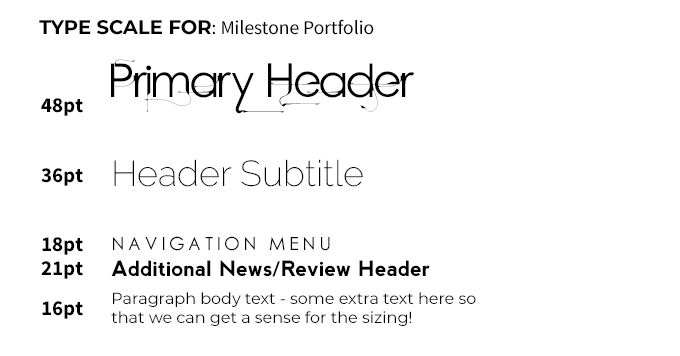
<style>
.page{position:relative;width:680px;height:356px;background:#ffffff}
.page>*{position:absolute;margin:0}
.t1{font:19.5px "SourceSansPro-Regular";color:#000000}
.t2{font:19.5px "Montserrat-Bold";color:#000000;text-transform:uppercase}
.t3{font:48px "BrightYoungThings";color:#000000}
.t4{font:21px "SourceSansPro-Bold";color:#000000}
.t5{font:36px "Raleway-ExtraLight";color:#000000}
.t6{font:18px "CenturyGothic";letter-spacing:0.2em;color:#000000}
.t7{font:21px "nevis-Bold";color:#000000}
.t8{font:16px/19.5px "Montserrat-Regular";color:#000000}
</style>
<div class="page">
<p class="t1" style="left:39px;top:19px;width:335px;height:16px"><span class="t2">TYPE SCALE for</span>: Milestone Portfolio</p>
<p class="t3" style="left:110px;top:59px;width:305px;height:55px">Primary Header</p>
<p class="t4" style="left:41px;top:98px;width:42px;height:18px">48pt</p>
<p class="t5" style="left:114px;top:159px;width:249px;height:28px">Header Subtitle</p>
<p class="t4" style="left:41px;top:168px;width:42px;height:18px">36pt</p>
<p class="t4" style="left:42px;top:237px;width:41px;height:18px">18pt</p>
<p class="t6" style="left:113px;top:236px;width:217px;height:15px">NAVIGATION MENU</p>
<p class="t4" style="left:41px;top:261px;width:42px;height:18px">21pt</p>
<p class="t7" style="left:111px;top:260px;width:319px;height:17px">Additional News/Review Header</p>
<p class="t8" style="left:111px;top:292px;width:365px;height:34px">Paragraph body text - some extra text here so that we can get a sense for the sizing!</p>
<p class="t4" style="left:42px;top:301px;width:41px;height:18px">16pt</p>
</div>
